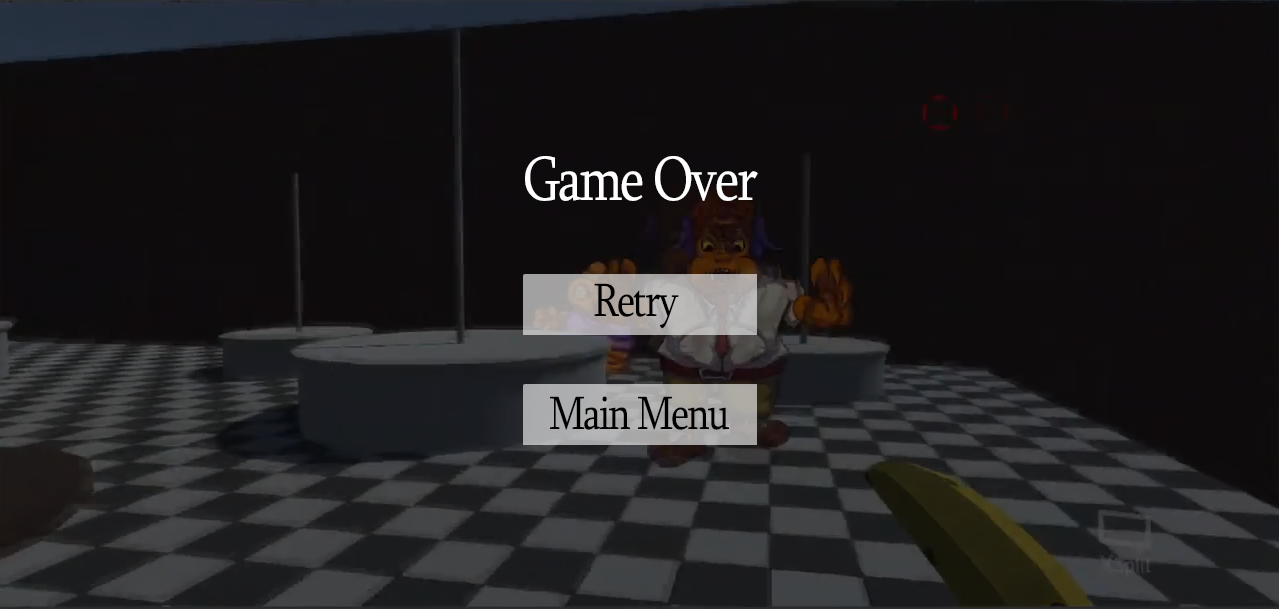
<style>
.page{position:relative;width:1279px;height:609px}
.page>*{position:absolute;margin:0}
.t1{font:64px "Sylfaen";letter-spacing:-0.05em;color:#ffffff;scale:0.83 1}
.t2{font:48px "Sylfaen";letter-spacing:-0.05em;color:#000000;scale:0.83 1}
</style>
<div class="page">
<p class="t1" style="left:525px;top:156px;width:233px;height:45px">Game Over</p>
<p class="t2" style="left:594px;top:283px;width:85px;height:46px">Retry</p>
<p class="t2" style="left:550px;top:396px;width:179px;height:34px">Main Menu</p>
</div>
